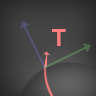
<style>
.page{position:relative;width:96px;height:96px}
.page>*{position:absolute;margin:0}
.t1{font:24px "Arial-BoldMT";color:#ff8080}
</style>
<div class="page">
<p class="t1" style="left:52px;top:29px;width:14px;height:17px">T</p>
</div>
